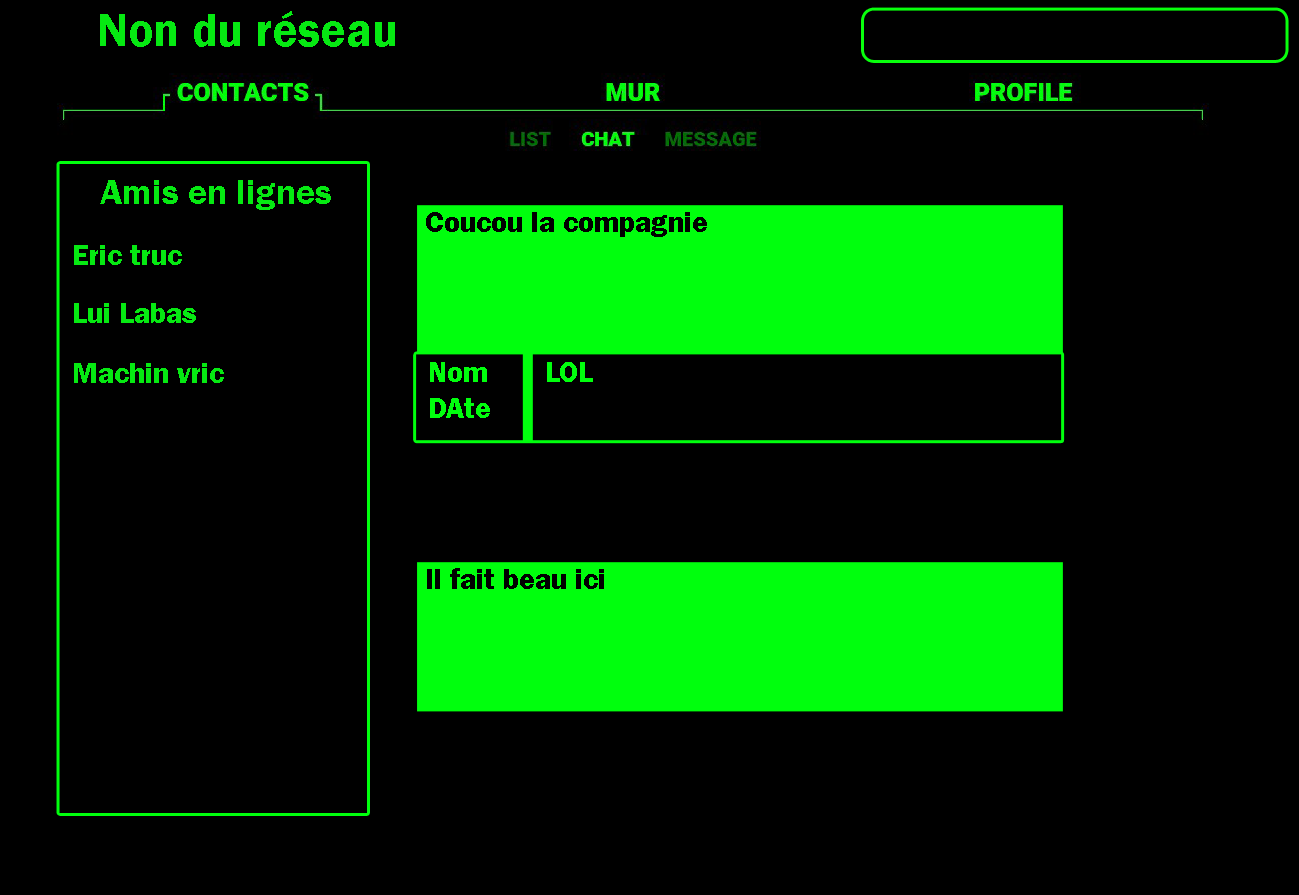
<style>
.page{position:relative;width:1299px;height:895px;background:#000000}
.page>*{position:absolute;margin:0}
.t1{font:48px "FranklinGothic-Demi";color:#06e912}
.t2{font:36px "FranklinGothic-Demi";color:#06e912}
.t3{font:30px "FranklinGothic-Demi";color:#000000}
.t4{font:30px "FranklinGothic-Demi";color:#06e912}
.t5{font:30px/18px "FranklinGothic-Demi";color:#00ff0d}
.t6{font:30px "FranklinGothic-Demi";color:#00ff0d}
</style>
<div class="page">
<p class="t1" style="left:100px;top:11px;width:295px;height:36px">Non du réseau</p>
<p class="t2" style="left:100px;top:180px;width:231px;height:30px">Amis en lignes</p>
<p class="t3" style="left:426px;top:212px;width:281px;height:25px">Coucou la compagnie</p>
<p class="t4" style="left:74px;top:245px;width:108px;height:20px">Eric truc</p>
<p class="t4" style="left:74px;top:303px;width:122px;height:20px">Lui Labas</p>
<p class="t4" style="left:74px;top:363px;width:150px;height:20px">Machin vric</p>
<p class="t5" style="left:430px;top:362px;width:60px;height:56px">Nom<br><br>DAte</p>
<p class="t6" style="left:547px;top:362px;width:46px;height:20px">LOL</p>
<p class="t3" style="left:427px;top:568px;width:177px;height:21px">Il fait beau ici</p>
</div>
